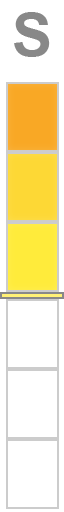
<style>
.page{position:relative;width:64px;height:512px;background:#ffffff}
.page>*{position:absolute;margin:0}
.t1{font:60px "Arial-BoldMT";color:#888888}
</style>
<div class="page">
<p class="t1" style="left:14px;top:12px;width:36px;height:45px">S</p>
</div>
